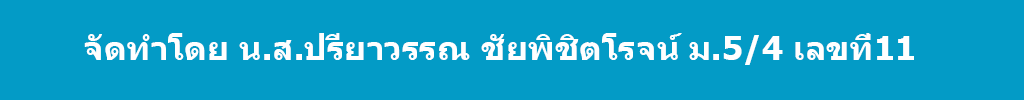
<style>
.page{position:relative;width:1024px;height:100px;background:#039bc6}
.page>*{position:absolute;margin:0}
.t1{font:33.3px "Tahoma-Bold";color:#ffffff}
</style>
<div class="page">
<p class="t1" style="left:84px;top:33px;width:830px;height:32px">จัดทำโดย น.ส.ปรียาวรรณ ชัยพิชิตโรจน์ ม.5/4 เลขท่ี่11</p>
</div>
